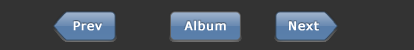
<style>
.page{position:relative;width:414px;height:50px;background:#333333}
.page>*{position:absolute;margin:0}
.t1{font:12px "Verdana";letter-spacing:0.05em;color:#ffffff;font-weight:bold}
</style>
<div class="page">
<p class="t1" style="left:73px;top:21px;width:29px;height:10px">Prev</p>
<p class="t1" style="left:184px;top:20px;width:42px;height:11px">Album</p>
<p class="t1" style="left:289px;top:21px;width:30px;height:10px">Next</p>
</div>
